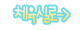
<style>
.page{position:relative;width:80px;height:30px;background:#ffffff}
.page>*{position:absolute;margin:0}
.t1{font:18px "YeopseoR-HM";letter-spacing:-0.075em;scale:0.8 1}
</style>
<div class="page">
<p class="t1" style="left:14px;top:6px;width:55px;height:18px">체육실로-&gt;</p>
</div>
